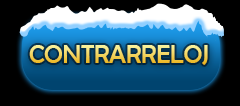
<style>
.page{position:relative;width:240px;height:106px;background:#000000}
.page>*{position:absolute;margin:0}
.t1{font:25.5px "BerlinSansFB-Reg"}
</style>
<div class="page">
<p class="t1" style="left:29px;top:45px;width:179px;height:20px">CONTRARRELOJ</p>
</div>
